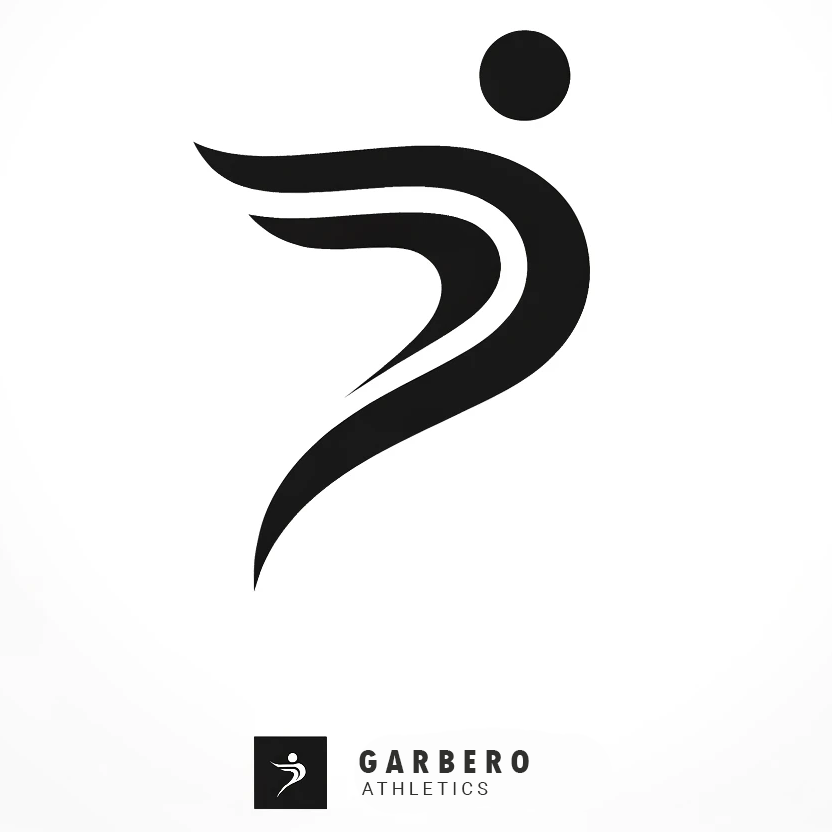
<style>
.page{position:relative;width:832px;height:832px;background:#ffffff}
.page>*{position:absolute;margin:0}
.t1{font:36px "TwCenMT-CondensedExtraBold";letter-spacing:0.2em;color:#30302e;text-transform:uppercase}
.t2{font:18px "Roboto-Regular";letter-spacing:0.2em;color:#30302e;text-transform:uppercase}
</style>
<div class="page">
<p class="t1" style="left:359px;top:750px;width:170px;height:23px">GARBERO</p>
<p class="t2" style="left:362px;top:782px;width:126px;height:13px">ATHLETICS</p>
</div>
